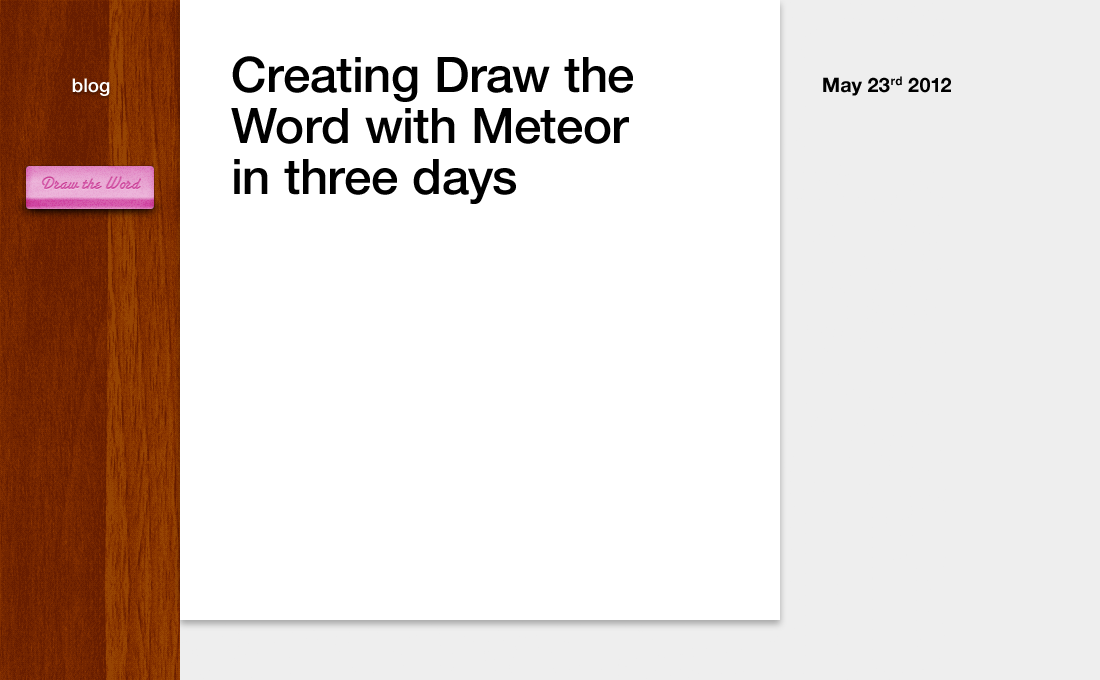
<style>
.page{position:relative;width:1100px;height:680px;background:#ffffff}
.page>*{position:absolute;margin:0}
.t1{font:49px/51px "HelveticaNeue-Medium";color:#000000}
.t2{font:19px "HelveticaNeue-Medium";color:#ffffff}
.t3{font:20px "HelveticaNeue-Bold";color:#000000}
</style>
<div class="page">
<p class="t1" style="left:231px;top:56px;width:402px;height:148px">Creating Draw the<br>Word with Meteor<br>in three days</p>
<p class="t2" style="left:72px;top:78px;width:38px;height:18px">blog</p>
<p class="t3" style="left:823px;top:76px;width:128px;height:20px">May 23rd 2012</p>
</div>
